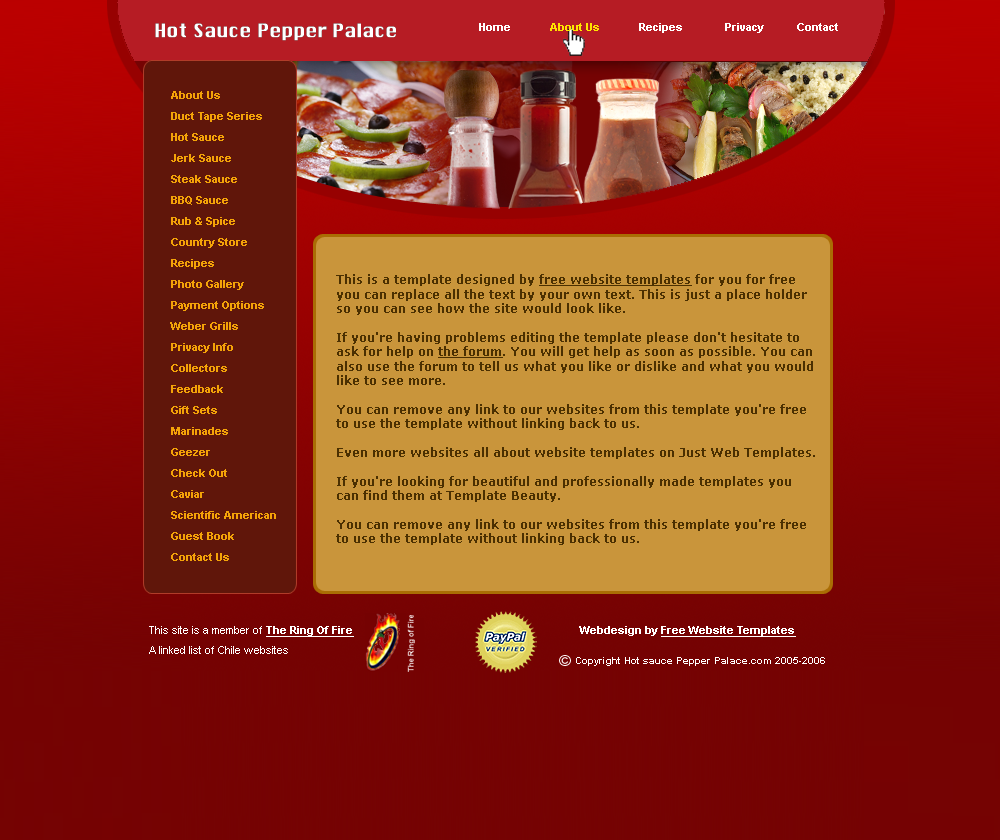
<style>
.page{position:relative;width:1000px;height:840px}
.page>*{position:absolute;margin:0}
.t1{font:18px "ChicagoLight";color:#ffffff;font-weight:bold}
.t2{font:11px "Arial-BoldMT";color:#ffffff}
.t3{font:11px "Arial-BoldMT";color:#ffe400}
.t4{font:11px/21px "Arial-BoldMT";color:#f4a308}
.t5{font:12px "Verdana-Bold";color:#4b3001}
.t6{font:12px "Verdana-Bold";color:#4b3001;text-decoration:underline}
.t7{font:11px/20px "ArialMT";color:#ffffff}
.t8{font:11px/20px "Arial-BoldMT";color:#ffffff;text-decoration:underline}
.t9{font:11px "Arial-BoldMT";color:#ffffff;text-decoration:underline}
.t10{font:10px "Arial-BoldMT";color:#ffffff}
</style>
<div class="page">
<p class="t1" style="left:155px;top:23px;width:241px;height:18px">Hot Sauce Pepper Palace</p>
<p class="t2" style="left:479px;top:23px;width:359px;height:10px">Home             <span class="t3">About Us</span>             Recipes              Privacy           Contact</p>
<p class="t4" style="left:170px;top:91px;width:106px;height:470px">About Us    <br>Duct Tape Series     Hot Sauce    <br>Jerk Sauce    <br>Steak Sauce    <br>BBQ Sauce    <br>Rub &amp; Spice    <br>Country Store    <br>Recipes    <br>Photo Gallery     Payment Options    <br>Weber Grills    <br>Privacy Info    <br>Collectors    <br>Feedback    <br>Gift Sets    <br>Marinades     Geezer    <br>Check Out    <br>Caviar    <br>Scientific American    <br>Guest Book    <br>Contact Us</p>
<p class="t5" style="left:336px;top:274px;width:479px;height:271px">This is a template designed by <span class="t6">free website templates</span> for you for free you can replace all the text by your own text. This is just a place holder so you can see how the site would look like. <br><br>If you're having problems editing the template please don't hesitate to ask for help on <span class="t6">the forum</span>. You will get help as soon as possible. You can also use the forum to tell us what you like or dislike and what you would like to see more. <br><br>You can remove any link to our websites from this template you're free to use the template without linking back to us.<br><br>Even more websites all about website templates on Just Web Templates.<br><br>If you're looking for beautiful and professionally made templates you can find them at Template Beauty.<br><br>You can remove any link to our websites from this template you're free to use the template without linking back to us.</p>
<p class="t7" style="left:149px;top:626px;width:205px;height:28px">This site is a member of <span class="t8">The Ring Of Fire<br></span>A linked list of Chile websites</p>
<p class="t9" style="left:579px;top:626px;width:217px;height:11px"><span class="t2">Webdesign by </span>Free Website Templates</p>
<p class="t10" style="left:576px;top:657px;width:249px;height:9px">Copyright Hot sauce Pepper Palace.com 2005-2006</p>
</div>
